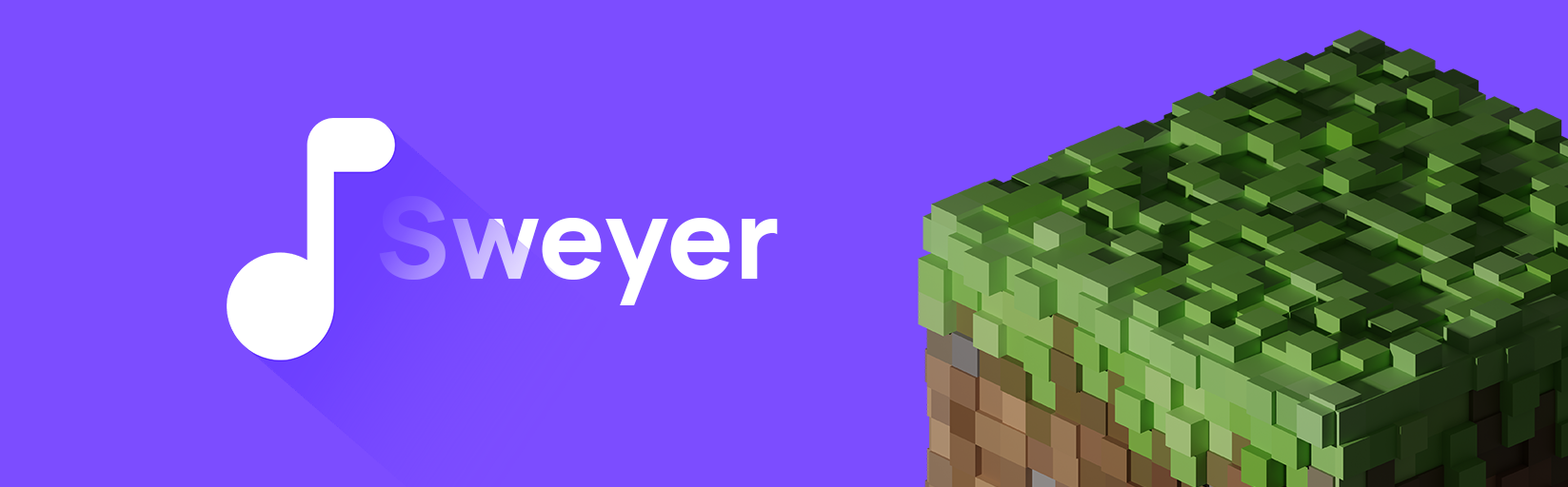
<style>
.page{position:relative;width:1568px;height:487px;background:#7c4dff}
.page>*{position:absolute;margin:0}
.t1{font:111.3px "Manrope-ExtraBold";color:#ffffff}
</style>
<div class="page">
<p class="t1" style="left:379px;top:196px;width:399px;height:110px">Sweyer</p>
</div>
